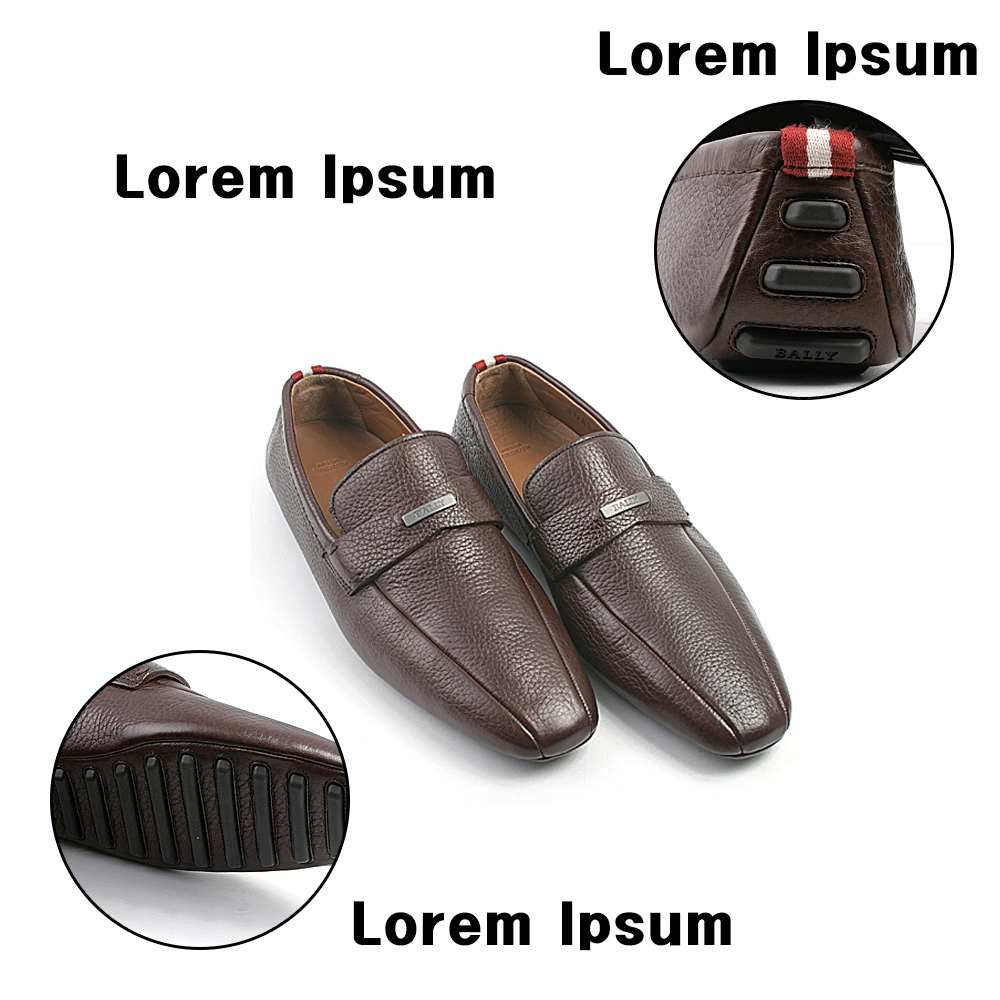
<style>
.page{position:relative;width:1000px;height:1000px;background:#ffffff}
.page>*{position:absolute;margin:0}
.t1{font:50px "HeadlineR-HM";color:#000000}
</style>
<div class="page">
<p class="t1" style="left:599px;top:31px;width:378px;height:50px">Lorem Ipsum</p>
<p class="t1" style="left:116px;top:154px;width:378px;height:50px">Lorem Ipsum</p>
<p class="t1" style="left:353px;top:901px;width:378px;height:50px">Lorem Ipsum</p>
</div>
